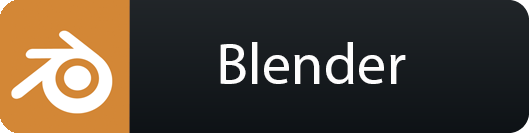
<style>
.page{position:relative;width:529px;height:133px}
.page>*{position:absolute;margin:0}
.t1{font:58.9px "MyriadPro-Regular";color:#fdfdfd}
</style>
<div class="page">
<p class="t1" style="left:220px;top:42px;width:186px;height:42px">Blender</p>
</div>
